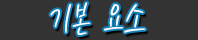
<style>
.page{position:relative;width:198px;height:40px;background:#333333}
.page>*{position:absolute;margin:0}
.t1{font:41.3px "KCC-eunyoung-Regular";color:#ffffff}
</style>
<div class="page">
<p class="t1" style="left:50px;top:2px;width:96px;height:33px">기본 요소</p>
</div>
